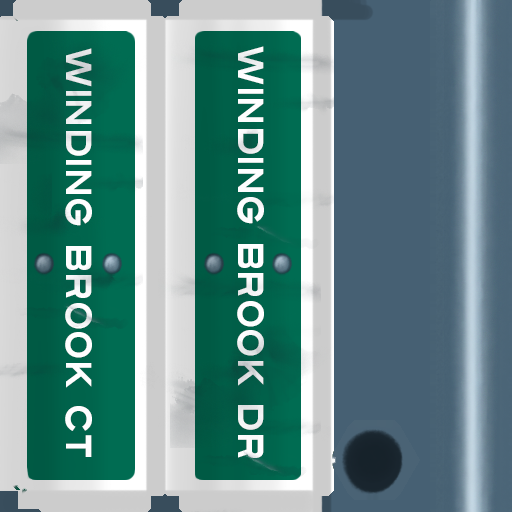
<style>
.page{position:relative;width:512px;height:512px}
.page>*{position:absolute;margin:0}
.t1{font:36px "Turnpike";color:#fefeff;scale:0.75 1}
</style>
<div class="page">
<p class="t1" style="left:65px;top:48px;width:27px;height:409px;rotate:90deg">Winding Brook CT</p>
<p class="t1" style="left:237px;top:46px;width:27px;height:412px;rotate:90deg">Winding Brook Dr</p>
</div>
